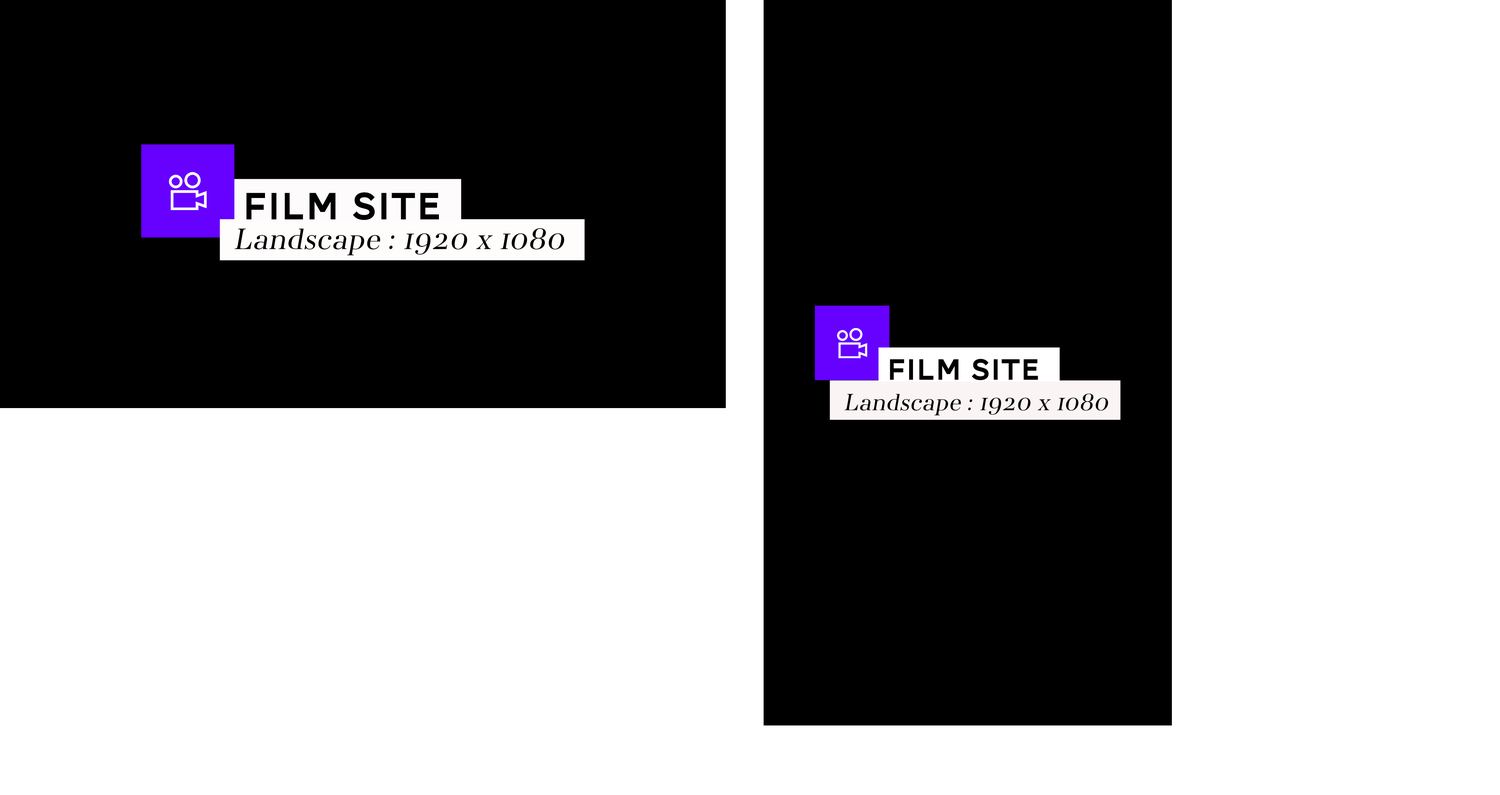
<style>
.page{position:relative;width:1500px;height:795px;background:#ffffff}
.page>*{position:absolute;margin:0}
.t1{font:39.3px "AWConquerorFreCarved-One";letter-spacing:0.025em;color:#000000}
.t2{font:30.2px "AWConquerorFreDidot-Regular";letter-spacing:0.025em;color:#000000;font-style:italic}
.t3{font:30.2px "AWConquerorFreCarved-One";letter-spacing:0.025em;color:#000000}
.t4{font:24.2px "AWConquerorFreDidot-Regular";letter-spacing:0.025em;color:#000000;font-style:italic}
</style>
<div class="page">
<p class="t1" style="left:246px;top:192px;width:193px;height:28px">Film Site</p>
<p class="t2" style="left:234px;top:228px;width:330px;height:27px">Landscape : 1920 x 1080</p>
<p class="t3" style="left:890px;top:359px;width:148px;height:21px">Film Site</p>
<p class="t4" style="left:844px;top:393px;width:264px;height:23px">Landscape : 1920 x 1080</p>
</div>
